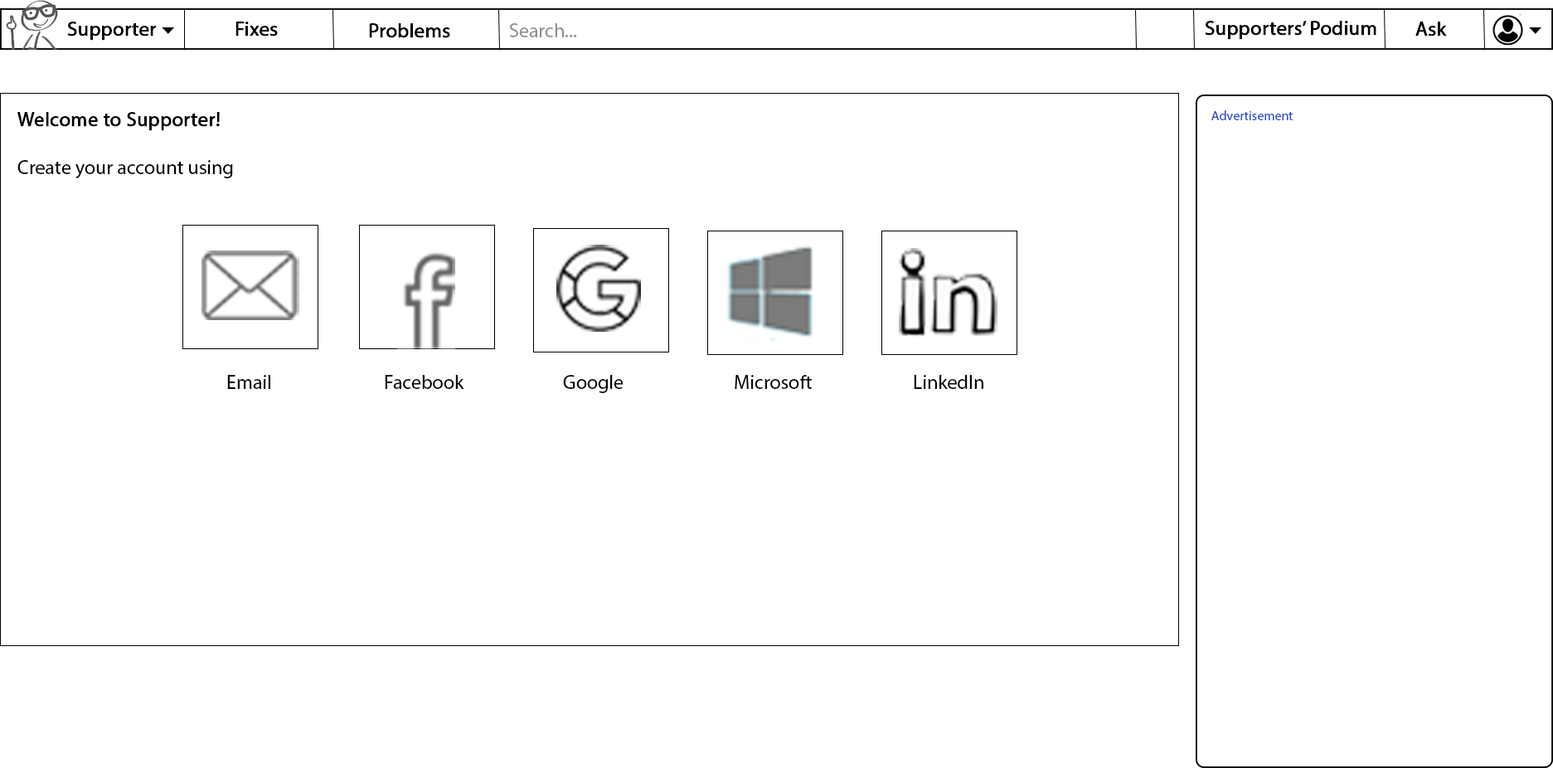
<style>
.page{position:relative;width:1553px;height:768px;background:#ffffff}
.page>*{position:absolute;margin:0}
.t1{font:19.9px "MyriadPro-Regular";color:#000000;font-weight:bold}
.t2{font:19.9px "MyriadPro-Regular";color:#919090}
.t3{font:19.9px "MyriadPro-Regular";color:#010000;font-weight:bold}
.t4{font:19.9px "MyriadPro-Regular";color:#000000}
.t5{font:13.3px "MyriadPro-Regular";color:#2d4fc9}
</style>
<div class="page">
<p class="t1" style="left:67px;top:22px;width:90px;height:19px">Supporter</p>
<p class="t1" style="left:235px;top:22px;width:43px;height:14px">Fixes</p>
<p class="t1" style="left:369px;top:23px;width:81px;height:15px">Problems</p>
<p class="t2" style="left:509px;top:23px;width:68px;height:14px">Search...</p>
<p class="t3" style="left:1205px;top:21px;width:171px;height:19px">Supporters’ Podium</p>
<p class="t1" style="left:1415px;top:22px;width:32px;height:14px">Ask</p>
<p class="t4" style="left:17px;top:112px;width:966px;height:281px"><span class="t1">Welcome to Supporter!<br><br></span>Create your account using<br><br><br><br><br><br><br><br><br>       Email      Facebook      Google    Microsoft    LinkedIn</p>
<p class="t5" style="left:1211px;top:110px;width:82px;height:10px">Advertisement</p>
</div>
